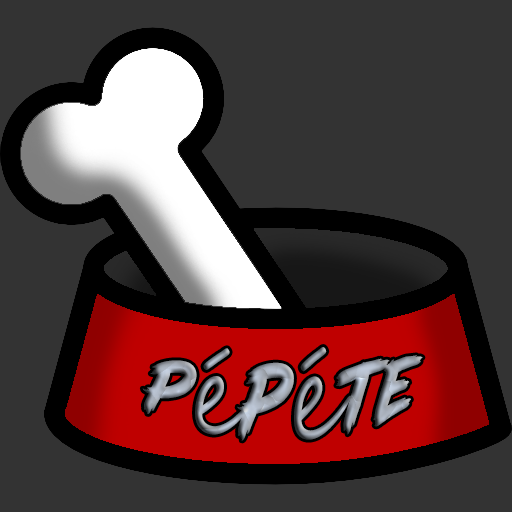
<style>
.page{position:relative;width:512px;height:512px;background:#333333}
.page>*{position:absolute;margin:0}
.t1{font:79.6px "PinkBlue";scale:1.15 1}
.t2{font:79.6px "SegoeScript";scale:1.15 1}
</style>
<div class="page">
<p class="t1" style="left:142px;top:347px;width:281px;height:94px;rotate:-1deg">P<span class="t2">é</span>p<span class="t2">é</span>te</p>
</div>
